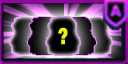
<style>
.page{position:relative;width:128px;height:64px}
.page>*{position:absolute;margin:0}
.t1{font:24px "FranklinGothic-Heavy";letter-spacing:0.15em;color:#ebf313;scale:0.75 1}
</style>
<div class="page">
<p class="t1" style="left:58px;top:27px;width:10px;height:18px">?</p>
</div>
